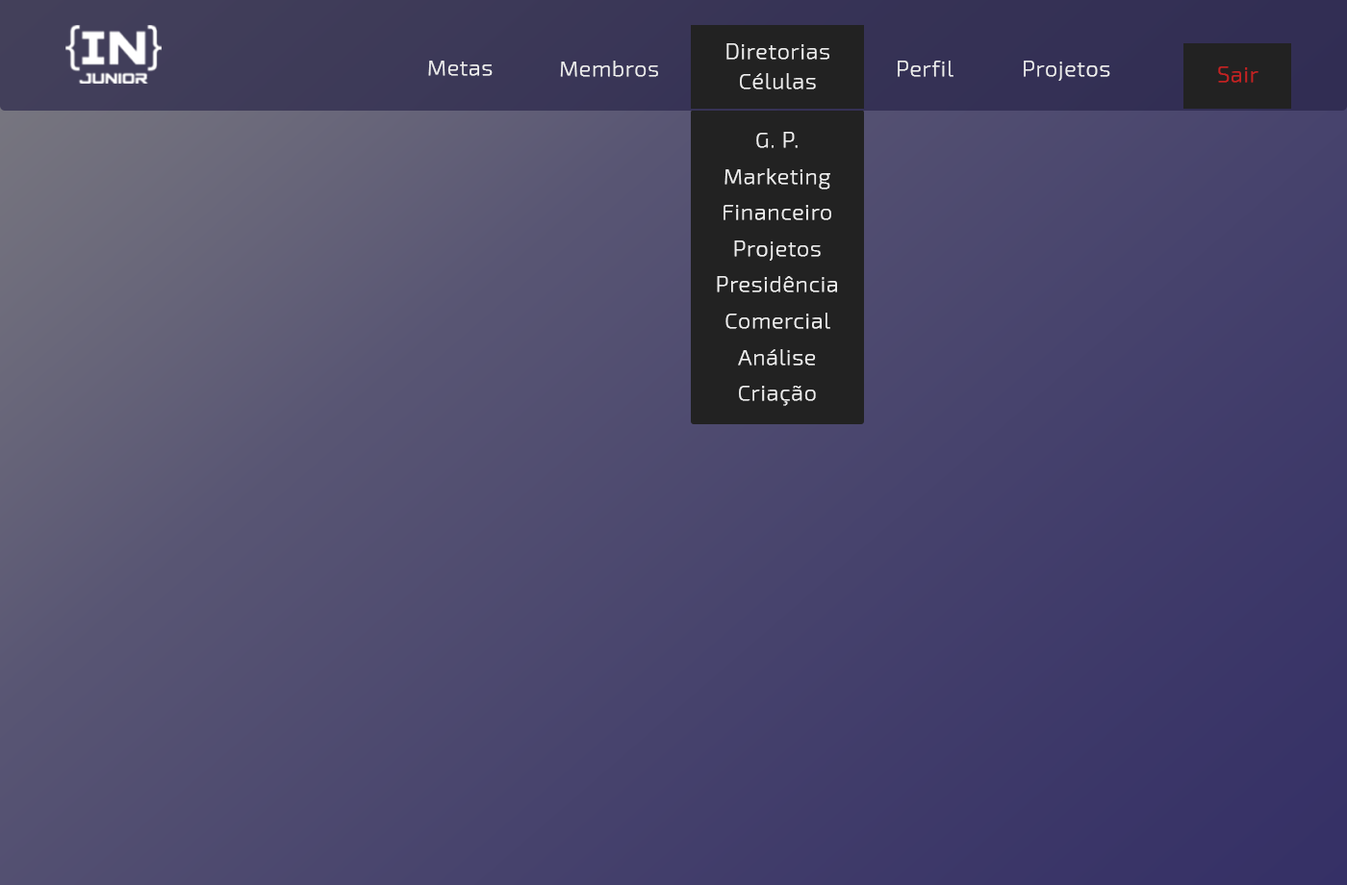
<style>
.page{position:relative;width:1347px;height:885px}
.page>*{position:absolute;margin:0}
.t1{font:21.7px/30.2px "Exo2-ExtraLight";letter-spacing:0.025em;color:#eeeeee;font-weight:bold}
.t2{font:21.7px "Exo2-ExtraLight";letter-spacing:0.025em;color:#eeeeee;font-weight:bold}
.t3{font:21.7px "Exo2-ExtraLight";letter-spacing:0.025em;color:#c32222;font-weight:bold}
.t4{font:21.7px/36.2px "Exo2-ExtraLight";letter-spacing:0.025em;color:#eeeeee;font-weight:bold}
</style>
<div class="page">
<p class="t1" style="left:726px;top:43px;width:103px;height:46px;text-align:center">Diretorias<br>Células</p>
<p class="t2" style="left:428px;top:61px;width:65px;height:15px">Metas</p>
<p class="t2" style="left:560px;top:61px;width:98px;height:16px">Membros</p>
<p class="t2" style="left:898px;top:61px;width:56px;height:16px">Perfil</p>
<p class="t2" style="left:1024px;top:61px;width:86px;height:20px">Projetos</p>
<p class="t3" style="left:1218px;top:66px;width:41px;height:17px">Sair</p>
<p class="t4" style="left:717px;top:132px;width:120px;height:274px;text-align:center">G. P.<br>Marketing<br>Financeiro<br>Projetos<br>Presidência<br>Comercial<br>Análise<br>Criação</p>
</div>
